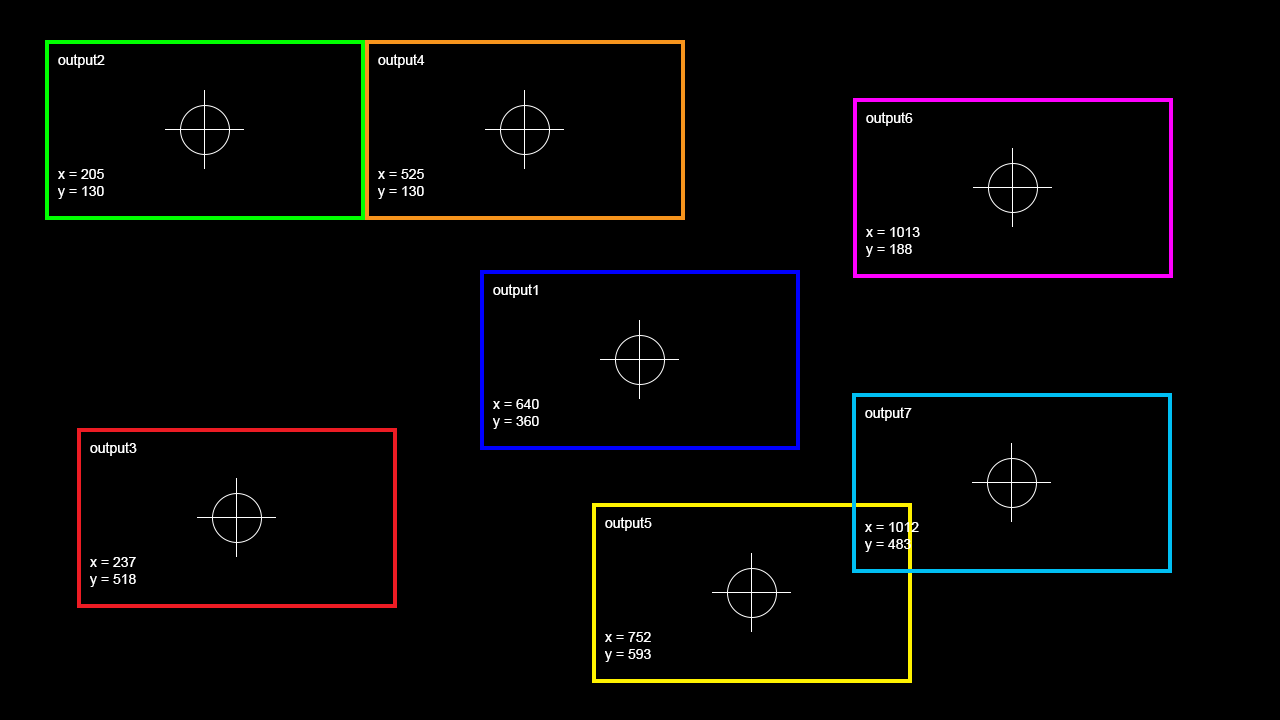
<style>
.page{position:relative;width:1280px;height:720px;background:#000000}
.page>*{position:absolute;margin:0}
.t1{font:14px "ArialMT";color:#ffffff}
</style>
<div class="page">
<p class="t1" style="left:58px;top:54px;width:47px;height:14px">output2</p>
<p class="t1" style="left:378px;top:54px;width:47px;height:14px">output4</p>
<p class="t1" style="left:866px;top:112px;width:47px;height:14px">output6</p>
<p class="t1" style="left:58px;top:169px;width:46px;height:30px">x = 205<br>y = 130</p>
<p class="t1" style="left:378px;top:169px;width:46px;height:30px">x = 525<br>y = 130</p>
<p class="t1" style="left:866px;top:227px;width:54px;height:30px">x = 1013<br>y = 188</p>
<p class="t1" style="left:493px;top:284px;width:45px;height:14px">output1</p>
<p class="t1" style="left:493px;top:399px;width:46px;height:30px">x = 640<br>y = 360</p>
<p class="t1" style="left:865px;top:407px;width:47px;height:14px">output7</p>
<p class="t1" style="left:90px;top:442px;width:47px;height:14px">output3</p>
<p class="t1" style="left:605px;top:517px;width:47px;height:14px">output5</p>
<p class="t1" style="left:865px;top:522px;width:54px;height:30px">x = 1012<br>y = 483</p>
<p class="t1" style="left:90px;top:557px;width:46px;height:30px">x = 237<br>y = 518</p>
<p class="t1" style="left:605px;top:632px;width:46px;height:30px">x = 752<br>y = 593</p>
</div>
